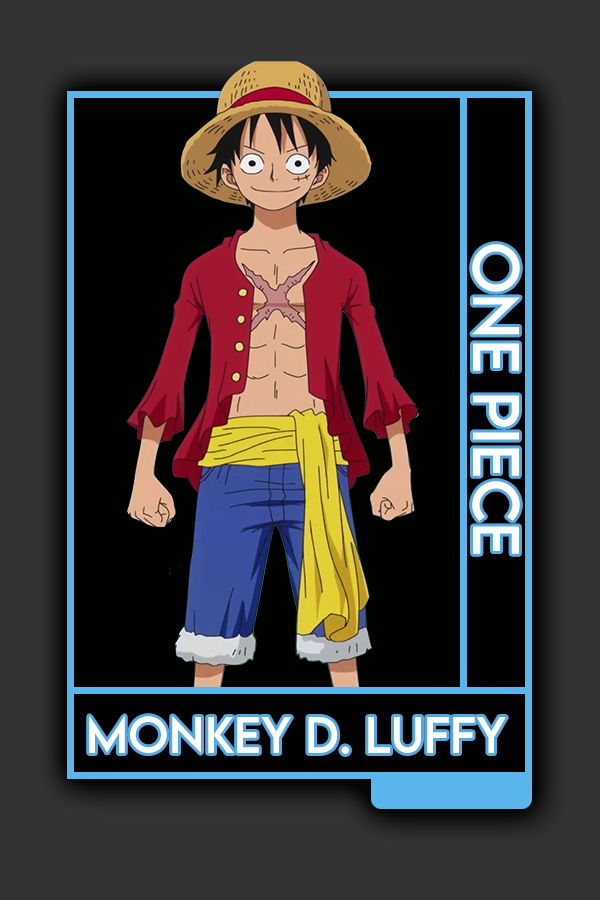
<style>
.page{position:relative;width:600px;height:900px;background:#333333}
.page>*{position:absolute;margin:0}
.t1{font:58.4px "LEMONMILK-Regular";color:#ffffff}
.t2{font:45.6px "LEMONMILK-Regular";color:#ffffff}
</style>
<div class="page">
<p class="t1" style="left:472px;top:244px;width:48px;height:310px;rotate:90deg">One Piece</p>
<p class="t2" style="left:89px;top:716px;width:417px;height:38px">Monkey D. Luffy</p>
</div>
